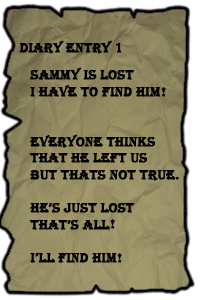
<style>
.page{position:relative;width:200px;height:300px}
.page>*{position:absolute;margin:0}
.t1{font:13.9px "Algerian";color:#000000;font-weight:bold}
</style>
<div class="page">
<p class="t1" style="left:19px;top:40px;width:103px;height:14px">Diary Entry 1</p>
<p class="t1" style="left:29px;top:67px;width:147px;height:196px;text-align:right">Sammy is lost<br>i have to find him<br><br><br>everyone thinks that he left us but thats not true<br><br>he’s just lost that’s all<br><br>i’ll find him</p>
<p class="t1" style="left:161px;top:87px;width:5px;height:10px">!</p>
<p class="t1" style="left:175px;top:177px;width:4px;height:3px">.</p>
<p class="t1" style="left:110px;top:219px;width:5px;height:10px">!</p>
<p class="t1" style="left:117px;top:253px;width:5px;height:10px">!</p>
</div>
